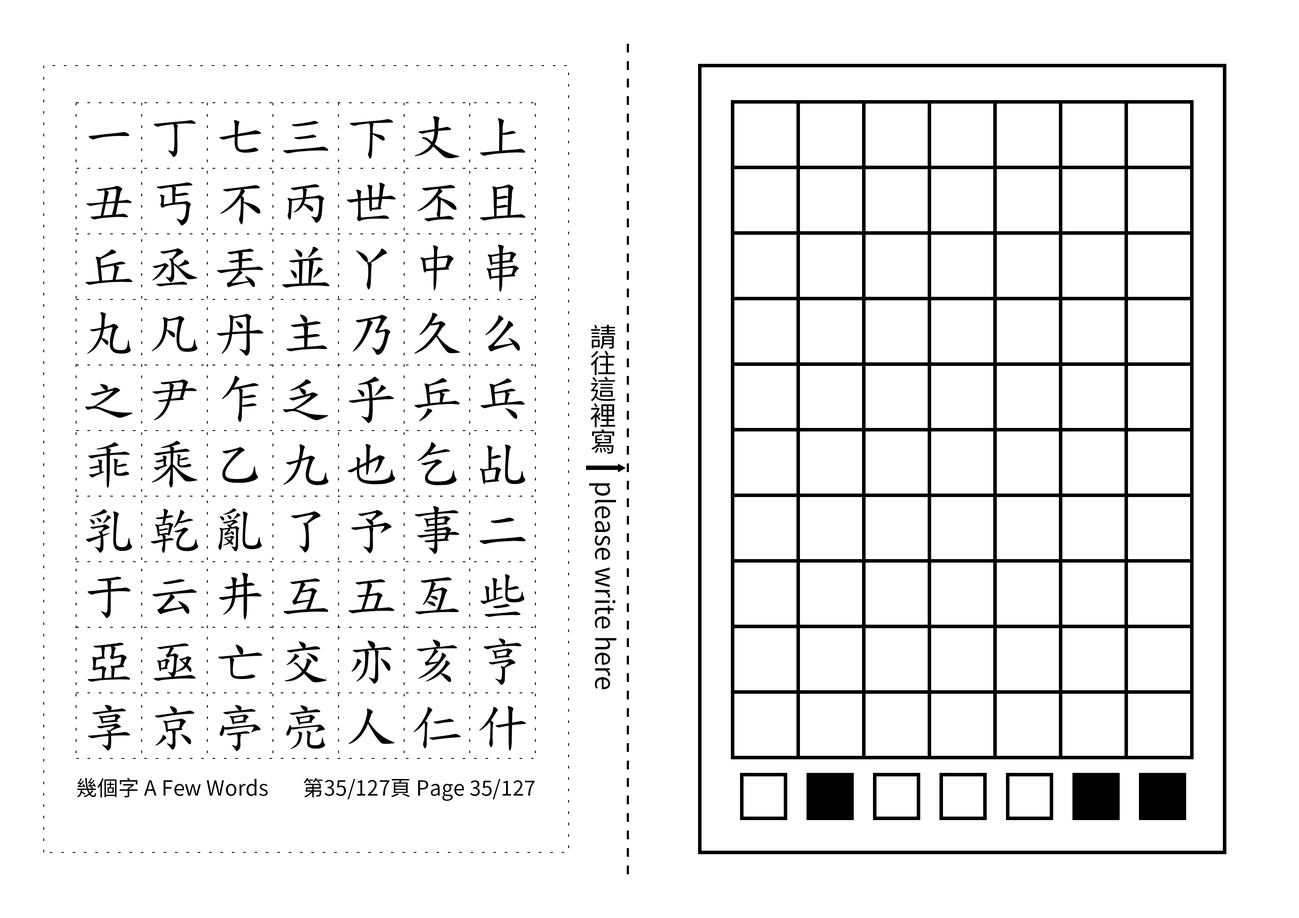
<style>
.page{position:relative;width:1299px;height:918px;background:#ffffff}
.page>*{position:absolute;margin:0}
.t1{font:52.5px/65.6px "TW-Kai-98_1";letter-spacing:0.25em;color:#000000}
.t2{font:26.2px "SourceHanSansTC-Regular";color:#000000}
.t3{font:21px "SourceHanSansTC-Regular";color:#000000}
</style>
<div class="page">
<p class="t1" style="left:85px;top:116px;width:441px;height:636px;text-align:center">一丁七三下丈上丑丐不丙世丕且丘丞丟並丫中串丸凡丹主乃久么之尹乍乏乎乒乓乖乘乙九也乞乩乳乾亂了予事二于云井互五亙些亞亟亡交亦亥亨享京亭亮人仁什</p>
<p class="t2" style="left:589px;top:324px;width:28px;height:366px;text-align:center">請往這裡寫　please write here</p>
<p class="t3" style="left:77px;top:778px;width:191px;height:20px">幾個字 A Few Words</p>
<p class="t3" style="left:303px;top:778px;width:232px;height:23px">第35/127頁 Page 35/127</p>
</div>
